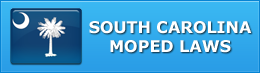
<style>
.page{position:relative;width:260px;height:73px}
.page>*{position:absolute;margin:0}
.t1{font:16px "Verdana-Bold";color:#ffffff;text-transform:uppercase}
</style>
<div class="page">
<p class="t1" style="left:89px;top:21px;width:163px;height:32px;text-align:center">South Carolina<br>moped laws</p>
</div>
